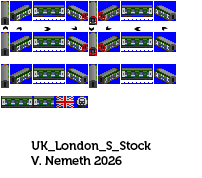
<style>
.page{position:relative;width:202px;height:178px;background:#ffffff}
.page>*{position:absolute;margin:0}
.t1{font:12px "Museo700-Regular";color:#000000}
</style>
<div class="page">
<p class="t1" style="left:31px;top:141px;width:120px;height:24px">UK_London_S_Stock<br>V. Nemeth 2026</p>
</div>
